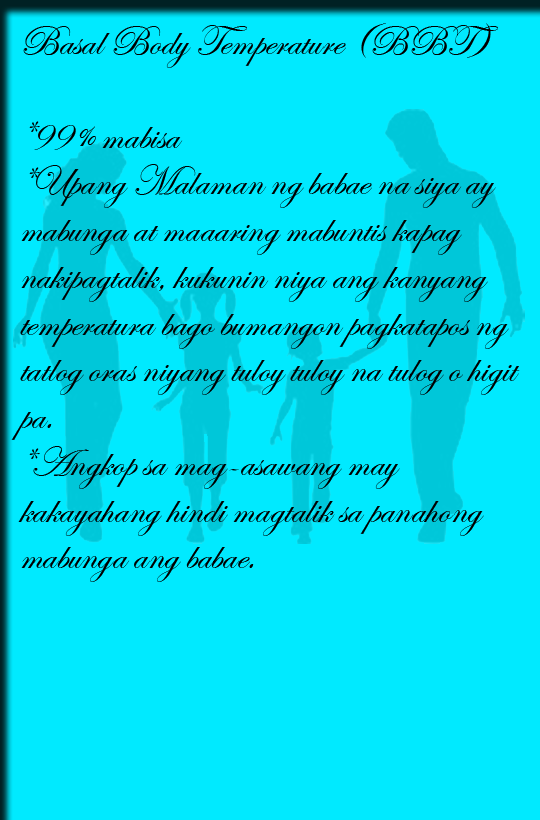
<style>
.page{position:relative;width:540px;height:820px;background:#00eaff}
.page>*{position:absolute;margin:0}
.t1{font:43.3px/46.7px "EdwardianScriptITC";color:#000000}
</style>
<div class="page">
<p class="t1" style="left:11px;top:23px;width:509px;height:559px">Basal Body Temperature (BBT)<br><br>*99% mabisa<br>*Upang Malaman ng babae na siya ay <br>mabunga at maaaring mabuntis kapag <br>nakipagtalik, kukunin niya ang kanyang <br>temperatura bago bumangon pagkatapos ng <br>tatlog oras niyang tuloy tuloy na tulog o higit <br>pa.<br>*Angkop sa mag-asawang may <br>kakayahang hindi magtalik sa panahong <br>mabunga ang babae.</p>
</div>
